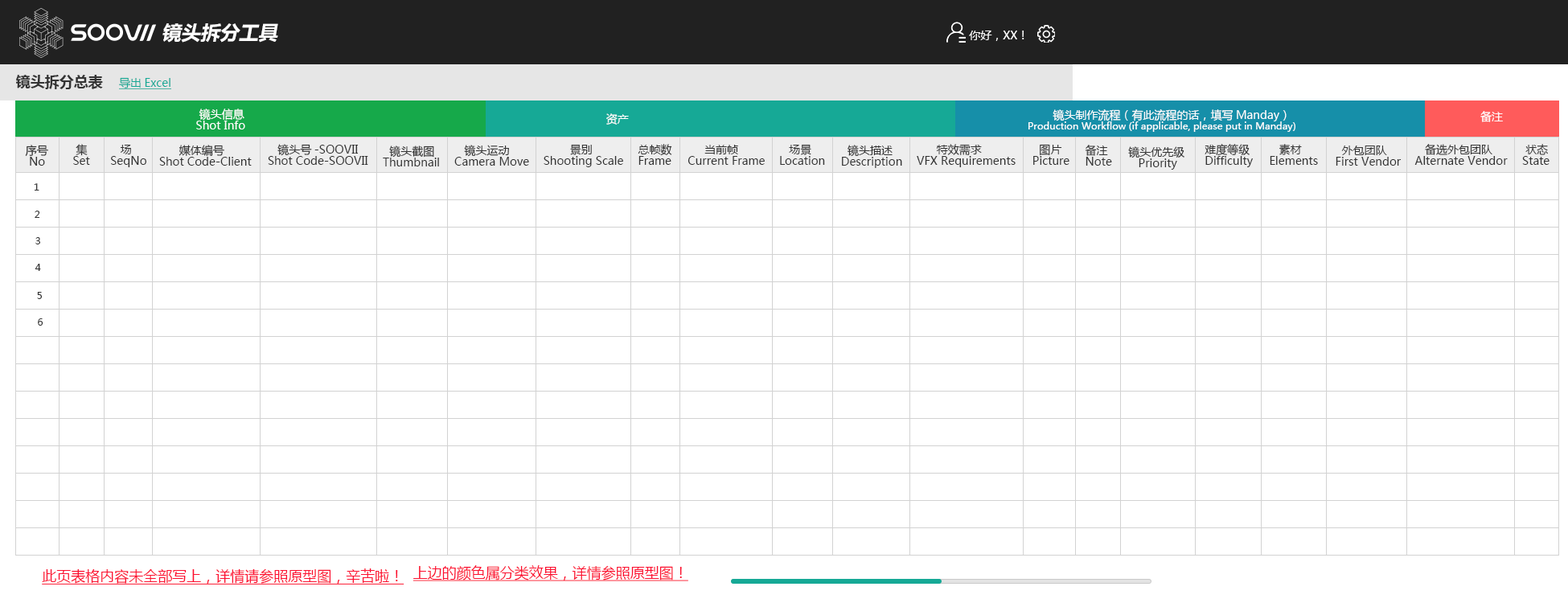
<style>
.page{position:relative;width:1568px;height:603px;background:#ffffff}
.page>*{position:absolute;margin:0}
.t1{font:19.3px "MicrosoftYaHei-Bold";color:#ffffff;font-style:italic}
.t2{font:11.3px "MicrosoftYaHei";color:#ffffff}
.t3{font:14.5px "MicrosoftYaHei-Bold";color:#333333}
.t4{font:11.3px "MicrosoftYaHei";color:#16a996;text-decoration:underline}
.t5{font:11.3px/11.3px "MicrosoftYaHei";color:#ffffff}
.t6{font:9.6px/11.3px "MicrosoftYaHei";color:#ffffff}
.t7{font:11.3px/11.3px "MicrosoftYaHei";color:#333333}
.t8{font:9.6px "MicrosoftYaHei";color:#333333}
.t9{font:14.5px "MicrosoftYaHei";color:#fc0f30;text-decoration:underline}
</style>
<div class="page">
<p class="t1" style="left:162px;top:23px;width:116px;height:20px">镜头拆分工具</p>
<p class="t2" style="left:969px;top:31px;width:55px;height:10px">你好，XX！</p>
<p class="t3" style="left:16px;top:75px;width:87px;height:14px">镜头拆分总表</p>
<p class="t4" style="left:119px;top:77px;width:52px;height:12px">导出Excel</p>
<p class="t5" style="left:196px;top:109px;width:49px;height:20px">镜头信息<br>Shot Info</p>
<p class="t2" style="left:606px;top:113px;width:23px;height:12px">资产</p>
<p class="t6" style="left:1028px;top:109px;width:267px;height:23px"><span class="t5">     镜头制作流程（有此流程的话，填写Manday）<br></span>Production Workflow (if applicable, please put in Manday)</p>
<p class="t2" style="left:1480px;top:111px;width:23px;height:11px">备注</p>
<p class="t7" style="left:25px;top:145px;width:23px;height:21px">序号<br> No</p>
<p class="t7" style="left:73px;top:144px;width:17px;height:21px">集<br>Set</p>
<p class="t7" style="left:111px;top:145px;width:35px;height:22px">场<br>SeqNo</p>
<p class="t7" style="left:159px;top:145px;width:93px;height:21px">媒体编号<br>Shot Code-Client</p>
<p class="t7" style="left:268px;top:144px;width:100px;height:21px">镜头号-SOOVII<br>Shot Code-SOOVII</p>
<p class="t7" style="left:383px;top:146px;width:56px;height:20px">镜头截图<br>Thumbnail</p>
<p class="t7" style="left:454px;top:145px;width:75px;height:21px">镜头运动<br>Camera Move</p>
<p class="t7" style="left:544px;top:144px;width:79px;height:23px">景别<br>Shooting Scale</p>
<p class="t7" style="left:638px;top:144px;width:34px;height:21px">总帧数      <br> Frame</p>
<p class="t7" style="left:688px;top:145px;width:77px;height:20px">当前帧<br>Current Frame</p>
<p class="t7" style="left:780px;top:144px;width:45px;height:21px">场景 <br>Location</p>
<p class="t7" style="left:842px;top:145px;width:60px;height:23px">镜头描述<br>Description</p>
<p class="t7" style="left:917px;top:144px;width:99px;height:23px">特效需求<br>VFX Requirements</p>
<p class="t7" style="left:1033px;top:144px;width:36px;height:21px">图片        <br>Picture</p>
<p class="t7" style="left:1085px;top:145px;width:27px;height:21px">备注<br>Note</p>
<p class="t7" style="left:1128px;top:146px;width:56px;height:24px">镜头优先级<br>   Priority</p>
<p class="t7" style="left:1205px;top:144px;width:48px;height:23px">难度等级<br>Difficulty</p>
<p class="t7" style="left:1270px;top:144px;width:48px;height:21px">素材<br>Elements</p>
<p class="t7" style="left:1336px;top:146px;width:66px;height:20px">外包团队<br>First Vendor</p>
<p class="t7" style="left:1414px;top:144px;width:94px;height:21px">备选外包团队<br>Alternate Vendor</p>
<p class="t7" style="left:1522px;top:144px;width:28px;height:21px">状态<br>State</p>
<p class="t8" style="left:34px;top:183px;width:5px;height:8px">1</p>
<p class="t8" style="left:35px;top:211px;width:5px;height:7px">2</p>
<p class="t8" style="left:35px;top:237px;width:5px;height:7px">3</p>
<p class="t8" style="left:35px;top:264px;width:6px;height:7px">4</p>
<p class="t8" style="left:37px;top:292px;width:5px;height:7px">5</p>
<p class="t8" style="left:38px;top:318px;width:5px;height:8px">6</p>
<p class="t9" style="left:42px;top:569px;width:362px;height:16px">此页表格内容未全部写上，详情请参照原型图，辛苦啦！</p>
<p class="t9" style="left:413px;top:565px;width:275px;height:16px">上边的颜色属分类效果，详情参照原型图！</p>
</div>
